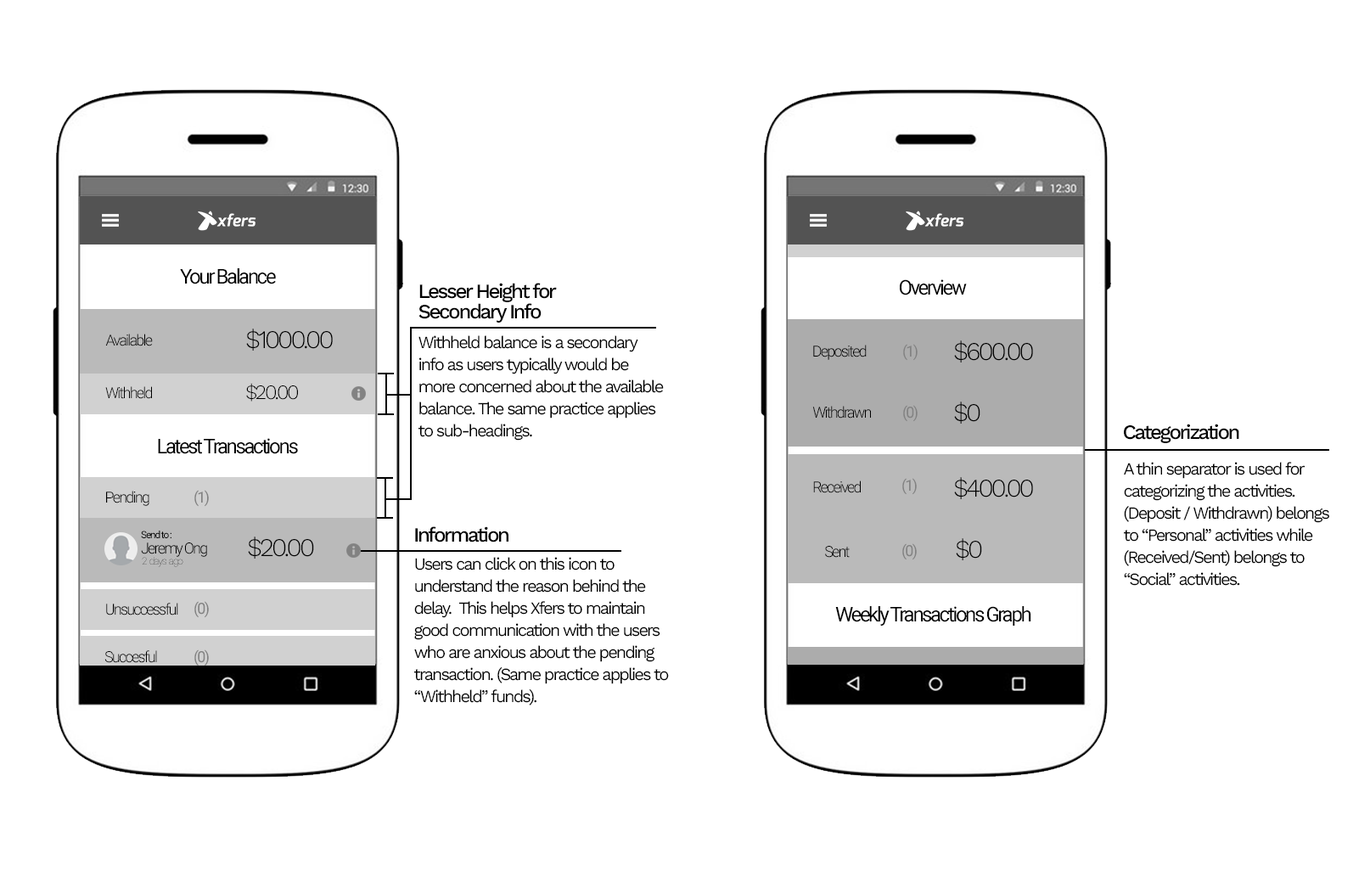
<style>
.page{position:relative;width:1370px;height:871px;background:#ffffff}
.page>*{position:absolute;margin:0}
.t1{font:20.4px "Roboto-Regular";letter-spacing:-0.1em;color:#000000}
.t2{font:20.4px/20.4px "WorkSans-Medium";letter-spacing:-0.1em;color:#000000}
.t3{font:25.5px "WorkSans-Light";letter-spacing:-0.1em;color:#000000}
.t4{font:15.3px "Roboto-Light";letter-spacing:-0.1em;color:#000000}
.t5{font:17px/22.1px "WorkSans-Regular";letter-spacing:-0.1em;color:#000000}
.t6{font:15.3px "Roboto-Regular";letter-spacing:-0.1em;color:#828282}
.t7{font:20.4px "WorkSans-Light";letter-spacing:-0.1em;color:#000000}
.t8{font:20.4px "WorkSans-Medium";letter-spacing:-0.1em;color:#000000}
.t9{font:10.2px "Roboto-Regular";letter-spacing:-0.1em;color:#000000}
.t10{font:10.2px "Roboto-Thin";letter-spacing:-0.1em}
</style>
<div class="page">
<p class="t1" style="left:180px;top:268px;width:96px;height:16px">Your Balance</p>
<p class="t1" style="left:899px;top:279px;width:68px;height:16px">Overview</p>
<p class="t2" style="left:418px;top:283px;width:139px;height:39px">Lesser Height for <br>Secondary Info</p>
<p class="t3" style="left:246px;top:328px;width:87px;height:22px">$1000.00</p>
<p class="t4" style="left:105px;top:333px;width:48px;height:13px">Available</p>
<p class="t5" style="left:418px;top:335px;width:246px;height:105px">Withheld balance is a secondary <br>info as users typically would be <br>more concerned about the available <br>balance. The same practice applies <br>to sub-headings.</p>
<p class="t3" style="left:954px;top:340px;width:79px;height:22px">$600.00</p>
<p class="t4" style="left:813px;top:345px;width:53px;height:15px">Deposited</p>
<p class="t6" style="left:903px;top:344px;width:14px;height:17px">(1)</p>
<p class="t4" style="left:105px;top:386px;width:47px;height:13px">Withheld</p>
<p class="t7" style="left:246px;top:383px;width:52px;height:18px">$20.00</p>
<p class="t3" style="left:954px;top:401px;width:26px;height:22px">$0</p>
<p class="t4" style="left:812px;top:406px;width:59px;height:12px">Withdrawn</p>
<p class="t6" style="left:903px;top:405px;width:14px;height:17px">(0)</p>
<p class="t8" style="left:1124px;top:423px;width:115px;height:20px">Categorization</p>
<p class="t1" style="left:158px;top:438px;width:140px;height:16px">Latest Transactions</p>
<p class="t5" style="left:1124px;top:462px;width:205px;height:124px">A thin separator is used for categorizing the activities. (Deposit / Withdrawn) belongs <br>to “Personal” activities while (Received/Sent) belongs to “Social” activities.</p>
<p class="t4" style="left:813px;top:480px;width:47px;height:13px">Received</p>
<p class="t6" style="left:902px;top:478px;width:14px;height:17px">(1)</p>
<p class="t3" style="left:954px;top:477px;width:79px;height:22px">$400.00</p>
<p class="t4" style="left:106px;top:490px;width:43px;height:16px">Pending</p>
<p class="t6" style="left:194px;top:490px;width:15px;height:17px">(1)</p>
<p class="t9" style="left:141px;top:530px;width:30px;height:8px">Send to :</p>
<p class="t8" style="left:415px;top:526px;width:93px;height:16px">Information</p>
<p class="t4" style="left:141px;top:542px;width:66px;height:15px">Jeremy Ong</p>
<p class="t3" style="left:248px;top:536px;width:66px;height:22px">$20.00</p>
<p class="t4" style="left:825px;top:546px;width:24px;height:12px">Sent</p>
<p class="t6" style="left:902px;top:543px;width:14px;height:17px">(0)</p>
<p class="t3" style="left:955px;top:538px;width:27px;height:22px">$0</p>
<p class="t10" style="left:142px;top:557px;width:41px;height:10px">2  days  ago</p>
<p class="t5" style="left:414px;top:557px;width:255px;height:148px">Users can click on this icon to understand the reason behind the delay.  This helps Xfers to maintain good communication with the users who are anxious about the pending transaction. (Same practice applies to “Withheld” funds).</p>
<p class="t4" style="left:106px;top:602px;width:72px;height:13px">Unsuccessful</p>
<p class="t6" style="left:194px;top:601px;width:15px;height:17px">(0)</p>
<p class="t1" style="left:835px;top:606px;width:196px;height:19px">Weekly Transactions Graph</p>
<p class="t4" style="left:104px;top:650px;width:53px;height:13px">Succesful</p>
<p class="t6" style="left:194px;top:649px;width:15px;height:17px">(0)</p>
</div>
